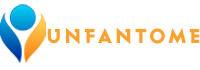
<style>
.page{position:relative;width:200px;height:70px;background:#ffffff}
.page>*{position:absolute;margin:0}
.t1{font:19.9px "AshbyBlack";letter-spacing:0.15em;color:#fba12f;text-transform:uppercase}
</style>
<div class="page">
<p class="t1" style="left:47px;top:27px;width:153px;height:18px">UNFANTOME</p>
</div>
